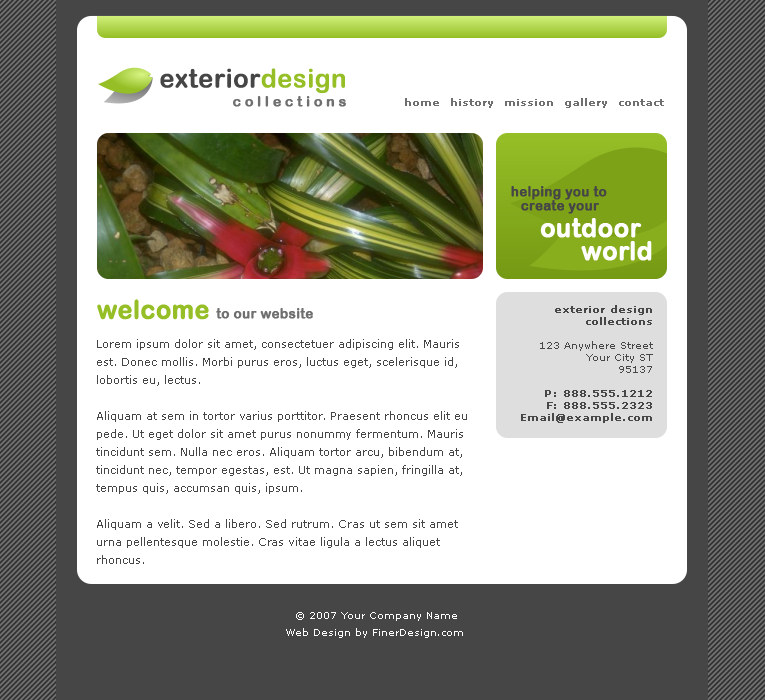
<style>
.page{position:relative;width:765px;height:700px;background:#ffffff}
.page>*{position:absolute;margin:0}
.t1{font:26px "ArialRoundedMTBold";color:#464646;font-weight:bold;scale:0.97 1}
.t2{font:26px "ArialRoundedMTBold";color:#96bf27;font-weight:bold;scale:0.97 1}
.t3{font:14px "ArialRoundedMTBold";color:#6f6f6f;font-weight:bold;scale:0.97 1}
.t4{font:10px "Verdana";color:#6f6f6f;font-weight:bold;scale:0.97 1}
.t5{font:14px "ArialRoundedMTBold";color:#464646;font-weight:bold;scale:0.96 1}
.t6{font:26px "ArialRoundedMTBold";color:#ffffff;font-weight:bold;scale:0.97 1}
.t7{font:26px "ArialRoundedMTBold";color:#96bf27;font-weight:bold;scale:0.96 1}
.t8{font:10px "Verdana";color:#474747;font-weight:bold;scale:0.97 1}
.t9{font:10px "Verdana";color:#474747;scale:0.97 1}
.t10{font:14px "ArialRoundedMTBold";color:#6f6f6f;font-weight:bold;scale:0.96 1}
.t11{font:11px/18px "Verdana";color:#464646;scale:0.97 1}
.t12{font:10px "Verdana";color:#fefefe;scale:0.97 1}
</style>
<div class="page">
<p class="t1" style="left:160px;top:68px;width:185px;height:26px">exterior<span class="t2">design</span></p>
<p class="t3" style="left:233px;top:96px;width:113px;height:11px">c o l l e c t i o n s</p>
<p class="t4" style="left:405px;top:98px;width:259px;height:10px">home  history  mission  gallery  contact</p>
<p class="t5" style="left:511px;top:186px;width:96px;height:14px">helping you to</p>
<p class="t5" style="left:521px;top:200px;width:78px;height:14px">create your</p>
<p class="t6" style="left:540px;top:218px;width:102px;height:20px">outdoor</p>
<p class="t6" style="left:581px;top:241px;width:71px;height:20px">world</p>
<p class="t7" style="left:97px;top:299px;width:112px;height:21px">welcome</p>
<p class="t8" style="left:521px;top:305px;width:132px;height:118px;text-align:right">exterior design<br>collections<br><span class="t9"><br>123 Anywhere Street<br>Your City ST<br>95137<br><br></span>P: 888.555.1212<br>F: 888.555.2323<br>Email@example.com</p>
<p class="t10" style="left:216px;top:308px;width:97px;height:11px">to our website</p>
<p class="t11" style="left:96px;top:339px;width:371px;height:225px">Lorem ipsum dolor sit amet, consectetuer adipiscing elit. Mauris<br>est. Donec mollis. Morbi purus eros, luctus eget, scelerisque id,<br>lobortis eu, lectus.<br><br>Aliquam at sem in tortor varius porttitor. Praesent rhoncus elit eu<br>pede. Ut eget dolor sit amet purus nonummy fermentum. Mauris<br>tincidunt sem. Nulla nec eros. Aliquam tortor arcu, bibendum at,<br>tincidunt nec, tempor egestas, est. Ut magna sapien, fringilla at,<br>tempus quis, accumsan quis, ipsum.<br><br>Aliquam a velit. Sed a libero. Sed rutrum. Cras ut sem sit amet<br>urna pellentesque molestie. Cras vitae ligula a lectus aliquet<br>rhoncus.</p>
<p class="t12" style="left:296px;top:612px;width:161px;height:9px">© 2007 Your Company Name</p>
<p class="t12" style="left:286px;top:628px;width:177px;height:10px">Web Design by FinerDesign.com</p>
</div>
